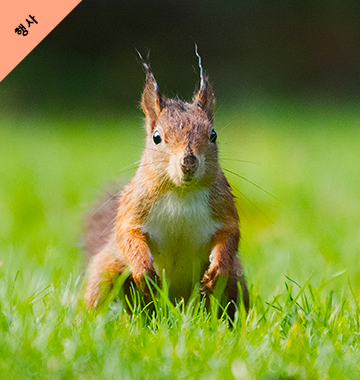
<style>
.page{position:relative;width:360px;height:380px}
.page>*{position:absolute;margin:0}
.t1{font:13px "JejuGothic";letter-spacing:0.075em;color:#000000;font-weight:bold}
</style>
<div class="page">
<p class="t1" style="left:14px;top:14px;width:24px;height:22px;rotate:-45deg">행사</p>
</div>
